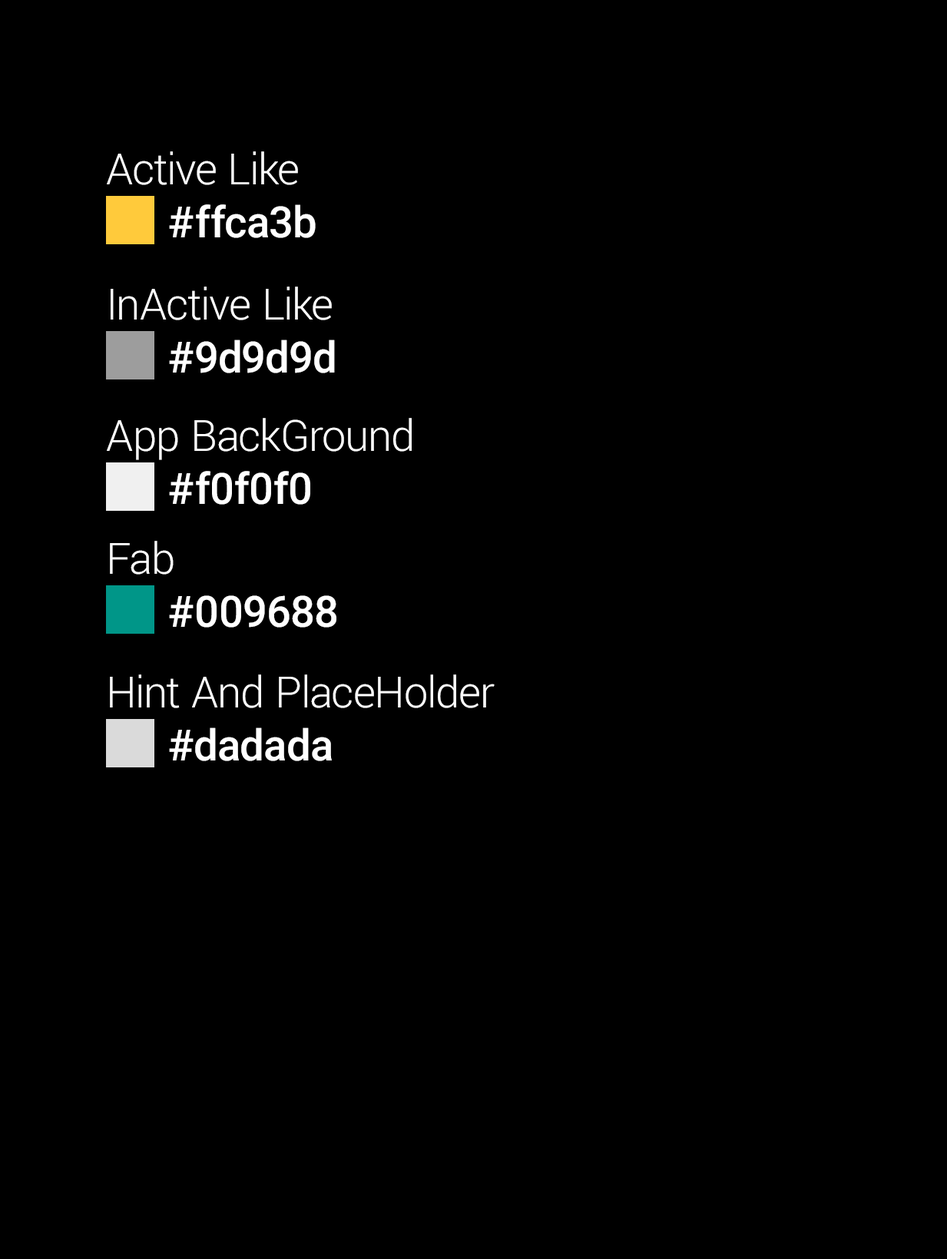
<style>
.page{position:relative;width:947px;height:1259px;background:#000000}
.page>*{position:absolute;margin:0}
.t1{font:43.2px "Roboto-Light";color:#ffffff}
.t2{font:43.2px "Roboto-Medium";color:#ffffff}
</style>
<div class="page">
<p class="t1" style="left:107px;top:151px;width:191px;height:34px">Active Like</p>
<p class="t2" style="left:169px;top:204px;width:147px;height:34px">#ffca3b</p>
<p class="t1" style="left:111px;top:287px;width:221px;height:33px">InActive Like</p>
<p class="t2" style="left:169px;top:340px;width:166px;height:33px">#9d9d9d</p>
<p class="t1" style="left:107px;top:418px;width:305px;height:42px">App BackGround</p>
<p class="t2" style="left:169px;top:471px;width:141px;height:34px">#f0f0f0</p>
<p class="t1" style="left:110px;top:541px;width:64px;height:34px">Fab</p>
<p class="t2" style="left:169px;top:595px;width:167px;height:33px">#009688</p>
<p class="t1" style="left:110px;top:674px;width:385px;height:34px">Hint And PlaceHolder</p>
<p class="t2" style="left:169px;top:727px;width:163px;height:34px">#dadada</p>
</div>
